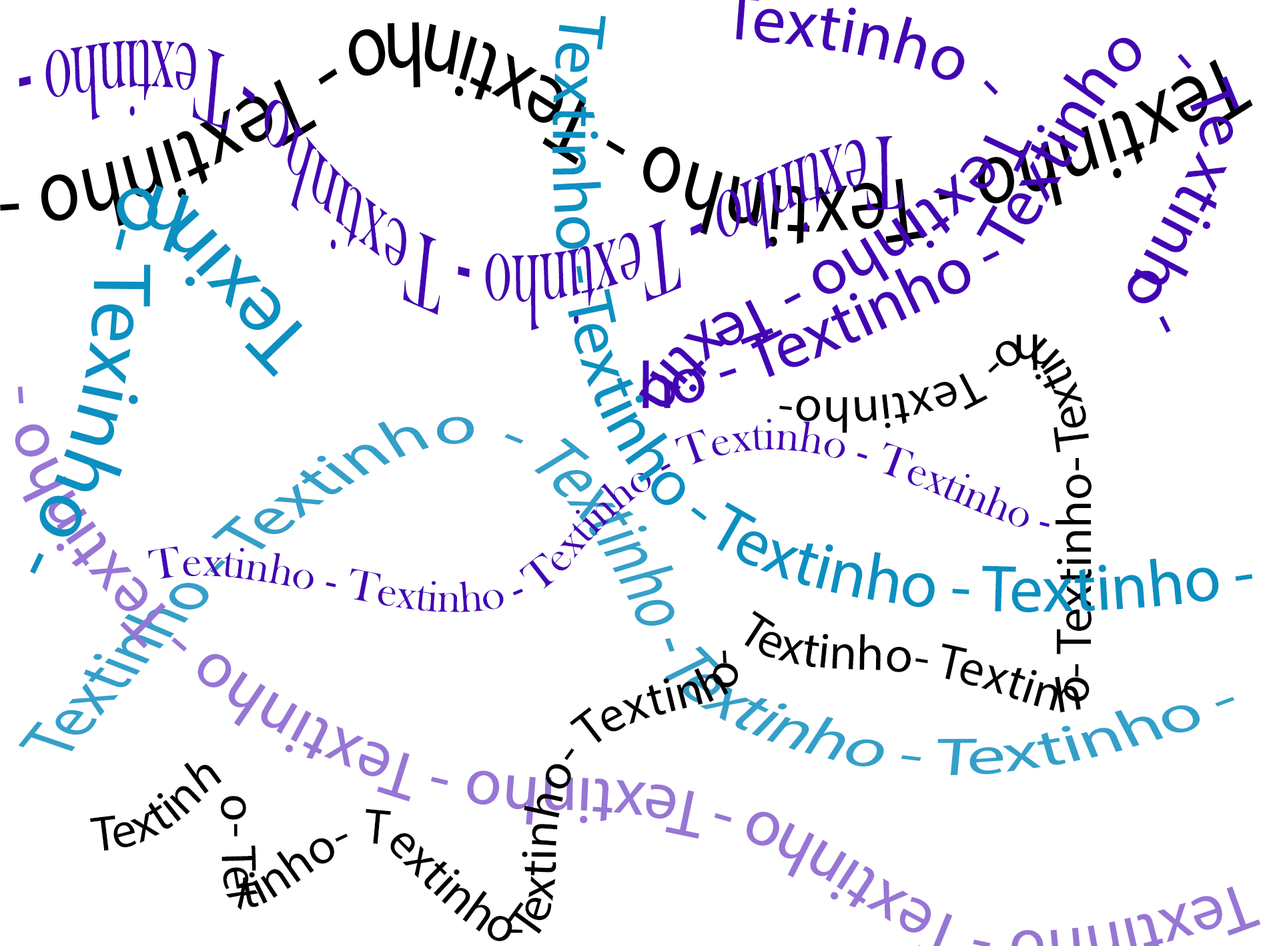
<style>
.page{position:relative;width:1261px;height:946px;background:#ffffff}
.page>*{position:absolute;margin:0}
.t1{font:66.7px "MyriadPro-Regular";color:#0b90c1}
.t2{font:91.4px "MyriadPro-Regular";color:#000000;scale:0.83 1}
.t3{font:109.2px "BaskOldFace";color:#4305b4;scale:0.48 1}
.t4{font:81.9px "BaskOldFace";color:#4305b4;scale:0.48 1}
.t5{font:61.4px "BerlinSansFBDemi-Bold";color:#010c33;scale:0.48 1}
.t6{font:83.4px "MyriadPro-Regular";color:#0b90c1}
.t7{font:50px "MyriadPro-Regular";color:#0b90c1}
.t8{font:50px "MyriadPro-Regular";color:#000000}
.t9{font:53.3px "MyriadPro-Regular";color:#34a0c9;scale:1.46 1}
.t10{font:44.5px "BaskOldFace";color:#4305b4}
.t11{font:33.4px "BaskOldFace";color:#4305b4}
.t12{font:25px "BerlinSansFBDemi-Bold";color:#010c33}
</style>
<div class="page">
<p class="t1" style="left:552px;top:15px;width:701px;height:598px">Textinho - Textinho - Textinho - Textinho - Textinho -</p>
<p class="t2" style="left:0px;top:22px;width:1253px;height:225px">Textinho - Textinho - Textinho - Textinho - Textinho - Textinho -</p>
<p class="t3" style="left:19px;top:39px;width:884px;height:291px">Textinho - Textinho - Textinho - Textinho - Textinho - Textinho - Textinho - <span class="t4">Textinho - </span><span class="t5">Textinho -</span></p>
<p class="t6" style="left:29px;top:185px;width:274px;height:389px">Texinho - Texinho - Texinho - Texinho - <span class="t7">Texinho -</span></p>
<p class="t8" style="left:90px;top:334px;width:1002px;height:607px">Textinho- Textinho- Textinho- Textinho- Textinho- Textinho- Textinho- Textinho- Textinho- Textinho- Textinho-Textinho-</p>
<p class="t9" style="left:18px;top:416px;width:1217px;height:359px;rotate:-5deg">Textinho - Textinho - Textinho - Textinho - Textinho - Textinho -</p>
<p class="t10" style="left:148px;top:418px;width:902px;height:194px">Textinho - Textinho - Textinho - Textinho - Textinho - Textinho - Textinho - <span class="t11">Textinho - </span><span class="t12">Textinho -</span></p>
</div>
